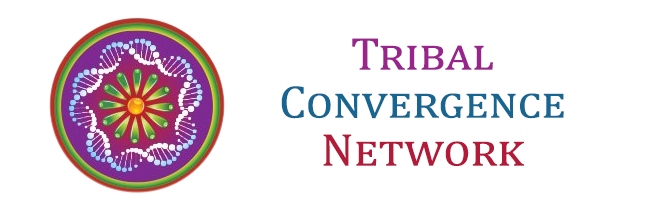
<style>
.page{position:relative;width:660px;height:214px;background:#ffffff}
.page>*{position:absolute;margin:0}
.t1{font:46.4px/48px "Cambria";color:#176691;font-variant:small-caps;scale:1.04 1}
.t2{font:46.4px/48px "Cambria";color:#99248c;font-variant:small-caps;scale:1.04 1}
.t3{font:46.4px/48px "Cambria";color:#b31a39;font-variant:small-caps;scale:1.04 1}
</style>
<div class="page">
<p class="t1" style="left:281px;top:38px;width:283px;height:128px;text-align:center"><span class="t2">Tribal<br></span>Convergence<br><span class="t3">Network</span></p>
</div>
